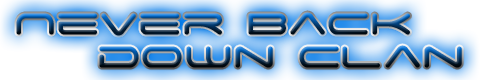
<style>
.page{position:relative;width:480px;height:80px}
.page>*{position:absolute;margin:0}
.t1{font:48px "SpaceAge"}
</style>
<div class="page">
<p class="t1" style="left:16px;top:12px;width:394px;height:24px">Never Back</p>
<p class="t1" style="left:99px;top:45px;width:363px;height:23px">down clan</p>
</div>
